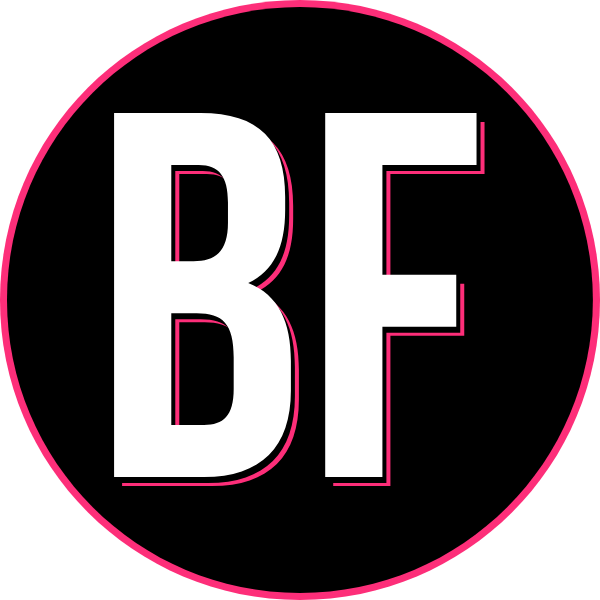
<style>
.page{position:relative;width:600px;height:600px;background:#000000}
.page>*{position:absolute;margin:0}
.t1{font:520px "BebasNeueBold";color:#ffffff}
</style>
<div class="page">
<p class="t1" style="left:114px;top:113px;width:363px;height:364px">BF</p>
<p class="t1" style="left:118px;top:119px;width:363px;height:364px">BF</p>
<p class="t1" style="left:122px;top:122px;width:363px;height:364px">BF</p>
</div>
